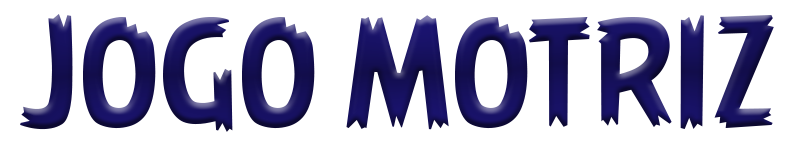
<style>
.page{position:relative;width:800px;height:142px;background:#ffffff}
.page>*{position:absolute;margin:0}
.t1{font:140px "AngryBirds-Regular";color:#16105b}
</style>
<div class="page">
<p class="t1" style="left:20px;top:14px;width:754px;height:118px">JOGO MOTRIZ</p>
</div>
